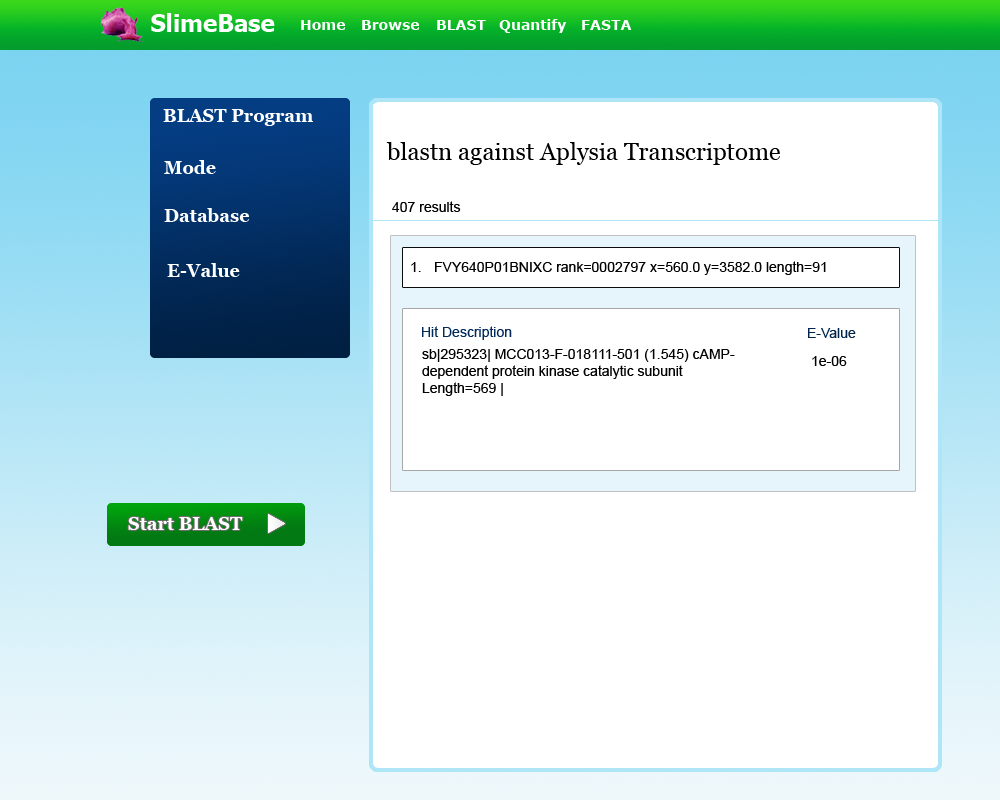
<style>
.page{position:relative;width:1000px;height:800px;background:#ffffff}
.page>*{position:absolute;margin:0}
.t1{font:24px "Tahoma-Bold";color:#ffffff}
.t2{font:14px "Verdana-Bold";color:#ffffff}
.t3{font:18px "Georgia-Bold";color:#ffffff}
.t4{font:24px "Georgia";color:#000000}
.t5{font:14px "ArialMT";color:#000000}
.t6{font:14px "ArialMT";color:#022b5c}
.t7{font:14px "ArialMT";color:#00254d}
</style>
<div class="page">
<p class="t1" style="left:151px;top:13px;width:124px;height:19px">SlimeBase</p>
<p class="t2" style="left:301px;top:20px;width:44px;height:10px">Home</p>
<p class="t2" style="left:362px;top:20px;width:57px;height:10px">Browse</p>
<p class="t2" style="left:437px;top:20px;width:49px;height:10px">BLAST</p>
<p class="t2" style="left:499px;top:19px;width:67px;height:14px">Quantify</p>
<p class="t2" style="left:582px;top:20px;width:50px;height:10px">FASTA</p>
<p class="t3" style="left:163px;top:109px;width:150px;height:17px">BLAST Program</p>
<p class="t4" style="left:386px;top:142px;width:394px;height:23px">blastn against Aplysia Transcriptome</p>
<p class="t3" style="left:164px;top:160px;width:52px;height:14px">Mode</p>
<p class="t3" style="left:164px;top:208px;width:86px;height:14px">Database</p>
<p class="t5" style="left:392px;top:201px;width:69px;height:11px">407 results</p>
<p class="t3" style="left:167px;top:263px;width:73px;height:14px">E-Value</p>
<p class="t5" style="left:411px;top:262px;width:10px;height:10px">1.</p>
<p class="t5" style="left:435px;top:261px;width:391px;height:14px">FVY640P01BNIXC rank=0002797 x=560.0 y=3582.0 length=91</p>
<p class="t6" style="left:422px;top:326px;width:90px;height:14px">Hit Description</p>
<p class="t7" style="left:808px;top:328px;width:48px;height:10px">E-Value</p>
<p class="t5" style="left:422px;top:349px;width:313px;height:47px">sb|295323| MCC013-F-018111-501 (1.545) cAMP-dependent protein kinase catalytic subunit Length=569 |</p>
<p class="t5" style="left:812px;top:356px;width:35px;height:10px">1e-06</p>
</div>
